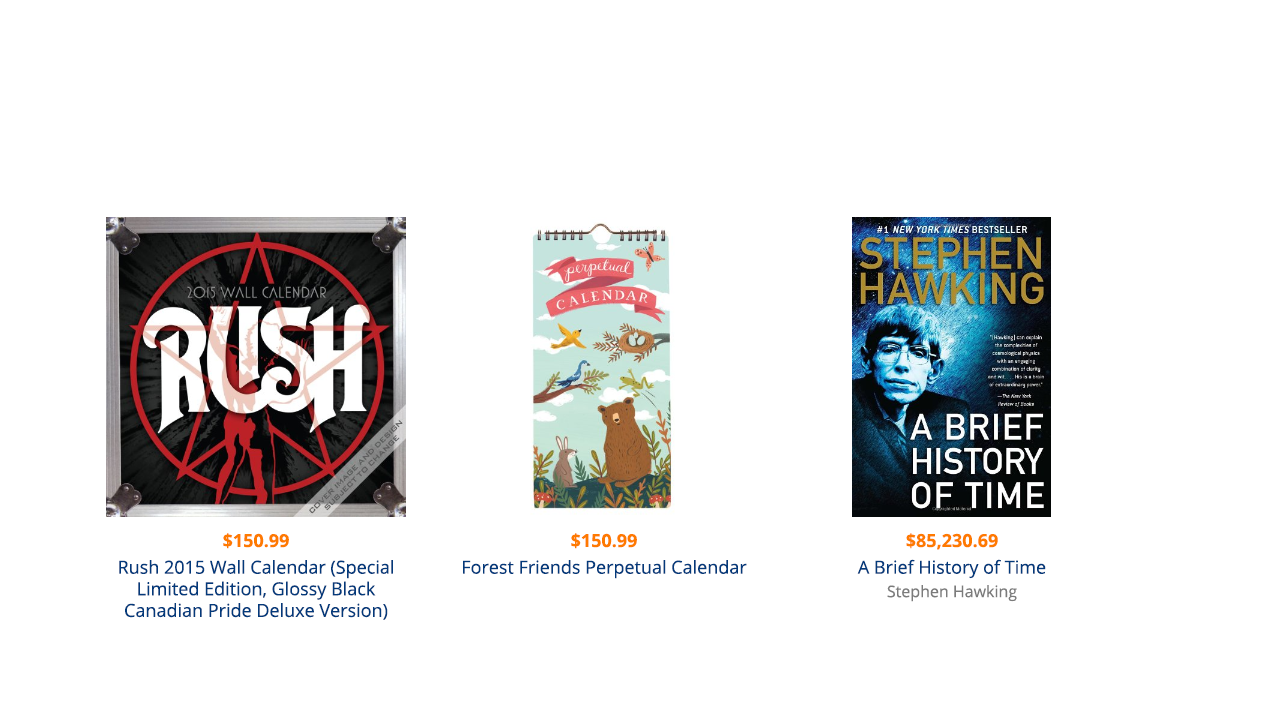
<style>
.page{position:relative;width:1280px;height:720px;background:#ffffff}
.page>*{position:absolute;margin:0}
.t1{font:18px "OpenSans-Bold";color:#fe7a00}
.t2{font:18px "OpenSans";color:#033a7b}
.t3{font:16px "OpenSans";color:#7b7b7b}
</style>
<div class="page">
<p class="t1" style="left:223px;top:533px;width:66px;height:16px">$150.99</p>
<p class="t1" style="left:571px;top:533px;width:66px;height:16px">$150.99</p>
<p class="t1" style="left:906px;top:533px;width:92px;height:17px">$85,230.69</p>
<p class="t2" style="left:119px;top:560px;width:274px;height:60px;text-align:center">Rush 2015 Wall Calendar (Special Limited Edition, Glossy Black Canadian Pride Deluxe Version)</p>
<p class="t2" style="left:463px;top:560px;width:284px;height:19px">Forest Friends Perpetual Calendar</p>
<p class="t2" style="left:857px;top:559px;width:189px;height:20px">A Brief History of Time</p>
<p class="t3" style="left:887px;top:585px;width:130px;height:17px">Stephen Hawking</p>
</div>
